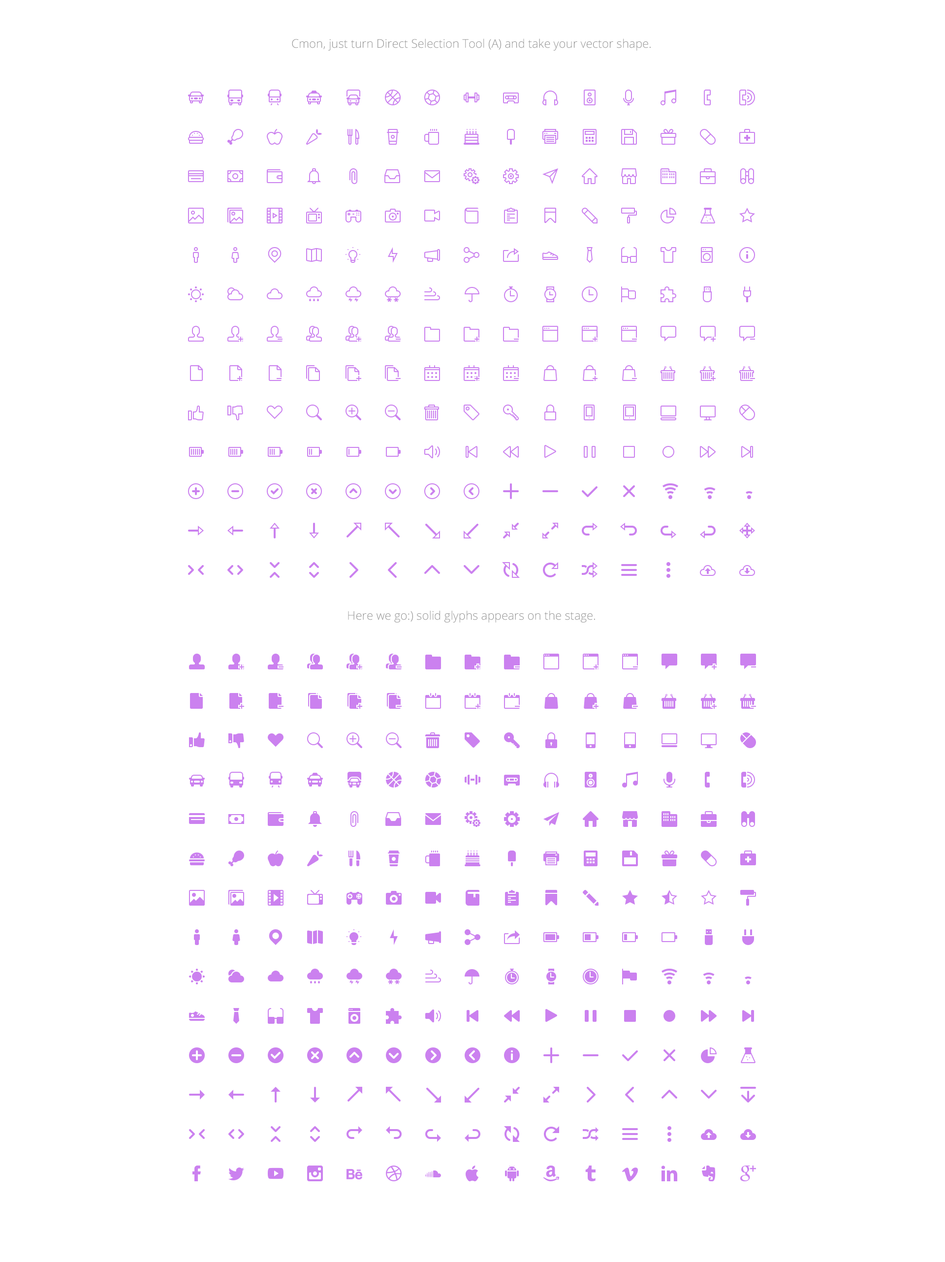
<style>
.page{position:relative;width:945px;height:1262px;background:#ffffff}
.page>*{position:absolute;margin:0}
.t1{font:11.8px "OpenSans-Light";color:#919191}
</style>
<div class="page">
<p class="t1" style="left:292px;top:38px;width:359px;height:13px">Cmon, just turn Direct Selection Tool (A) and take your vector shape.</p>
<p class="t1" style="left:348px;top:610px;width:247px;height:13px">Here we go:) solid glyphs appears on the stage.</p>
</div>
